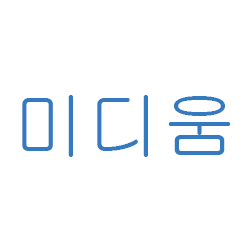
<style>
.page{position:relative;width:250px;height:250px;background:#ffffff}
.page>*{position:absolute;margin:0}
.t1{font:75px "Gulim";color:#337ac1;font-variant:small-caps}
</style>
<div class="page">
<p class="t1" style="left:22px;top:95px;width:209px;height:62px">미디움</p>
</div>
